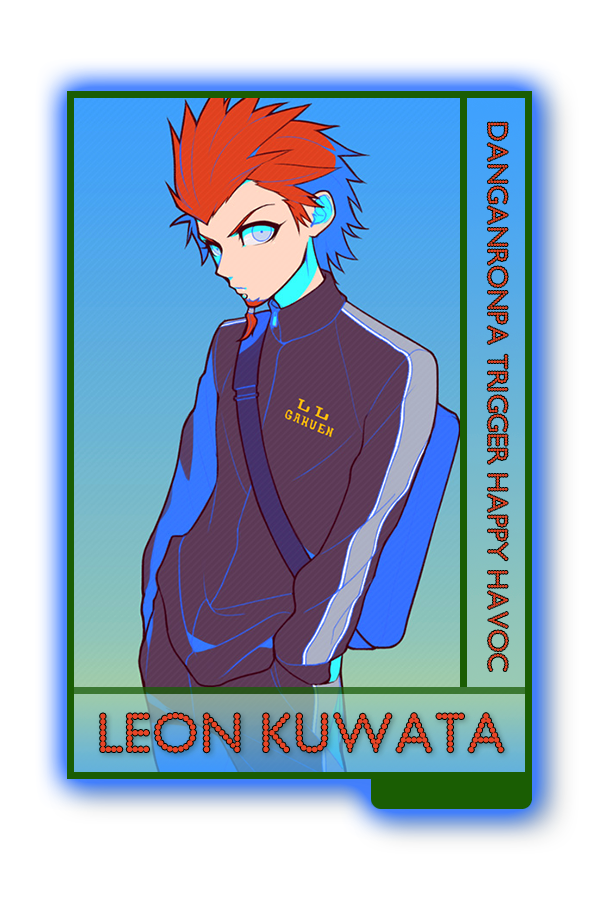
<style>
.page{position:relative;width:600px;height:900px;background:#ffffff}
.page>*{position:absolute;margin:0}
.t1{font:28.3px "BeadChain";color:#e64c33}
.t2{font:56px "BeadChain";color:#e64c33}
</style>
<div class="page">
<p class="t1" style="left:487px;top:122px;width:21px;height:549px;rotate:90deg">DANGANRONPA TRIGGER HAPPY HAVOC</p>
<p class="t2" style="left:100px;top:713px;width:404px;height:40px">LEON KUWATA</p>
</div>
